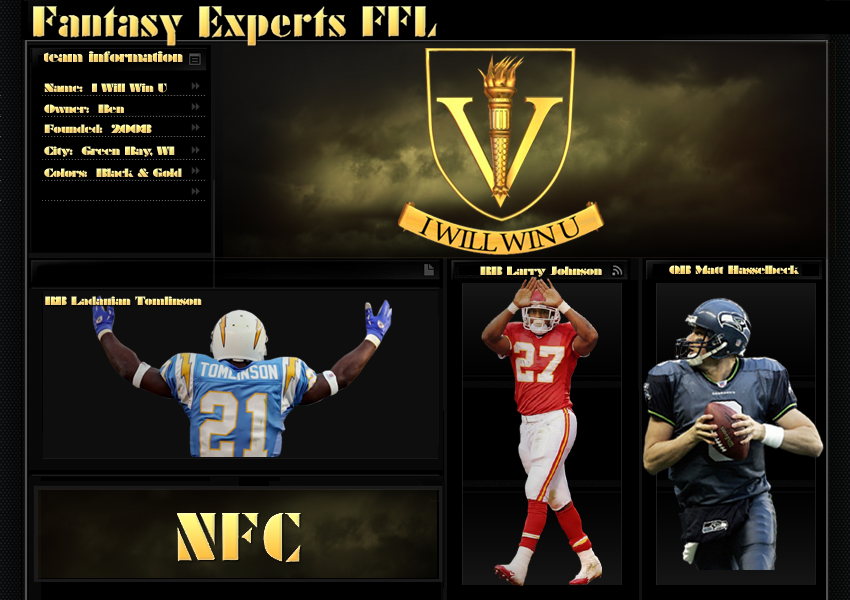
<style>
.page{position:relative;width:850px;height:600px;background:#000000}
.page>*{position:absolute;margin:0}
.t1{font:14px "Braggadocio";letter-spacing:-0.075em}
.t2{font:11px "Braggadocio";letter-spacing:-0.075em}
</style>
<div class="page">
<p class="t1" style="left:44px;top:51px;width:139px;height:11px">team information</p>
<p class="t2" style="left:44px;top:83px;width:123px;height:10px">Name:  I Will Win U</p>
<p class="t2" style="left:44px;top:104px;width:80px;height:9px">Owner:  Ben</p>
<p class="t2" style="left:44px;top:124px;width:108px;height:9px">Founded:  2008</p>
<p class="t2" style="left:44px;top:146px;width:131px;height:11px">City:  Green Bay, WI</p>
<p class="t2" style="left:44px;top:168px;width:138px;height:10px">Colors:  Black &amp; Gold</p>
<p class="t2" style="left:480px;top:266px;width:122px;height:11px">RB Larry Johnson</p>
<p class="t2" style="left:669px;top:265px;width:130px;height:10px">QB Matt Hasselbeck</p>
<p class="t2" style="left:45px;top:296px;width:157px;height:10px">RB Ladanian Tomlinson</p>
</div>
